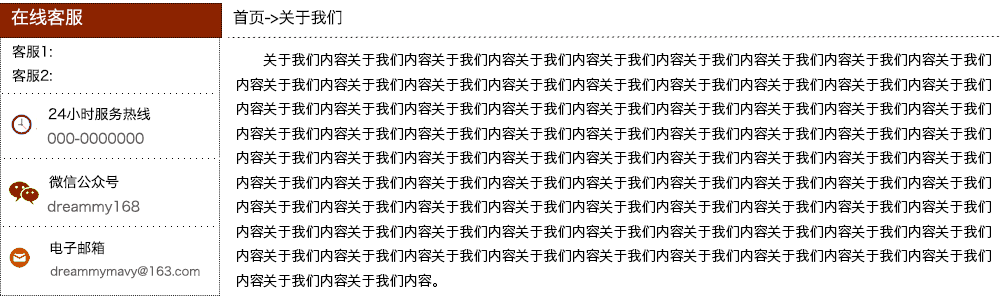
<style>
.page{position:relative;width:1000px;height:300px;background:#ffffff}
.page>*{position:absolute;margin:0}
.t1{font:18px "HiraginoSansGB-W3";color:#ffffff}
.t2{font:16px "HiraginoSansGB-W3";color:#000000}
.t3{font:14px "HiraginoSansGB-W3";color:#000000}
.t4{font:14px "HiraginoSansGB-W3";color:#615e5e}
.t5{font:12px "HiraginoSansGB-W3";color:#615e5e}
</style>
<div class="page">
<p class="t1" style="left:11px;top:8px;width:72px;height:18px">在线客服</p>
<p class="t2" style="left:233px;top:9px;width:109px;height:16px">首页-&gt;关于我们</p>
<p class="t3" style="left:12px;top:44px;width:40px;height:14px">客服1:</p>
<p class="t3" style="left:237px;top:52px;width:754px;height:236px">关于我们内容关于我们内容关于我们内容关于我们内容关于我们内容关于我们内容关于我们内容关于我们内容关于我们<br>内容关于我们内容关于我们内容关于我们内容关于我们内容关于我们内容关于我们内容关于我们内容关于我们内容关于我们<br>内容关于我们内容关于我们内容关于我们内容关于我们内容关于我们内容关于我们内容关于我们内容关于我们内容关于我们<br>内容关于我们内容关于我们内容关于我们内容关于我们内容关于我们内容关于我们内容关于我们内容关于我们内容关于我们<br>内容关于我们内容关于我们内容关于我们内容关于我们内容关于我们内容关于我们内容关于我们内容关于我们内容关于我们<br>内容关于我们内容关于我们内容关于我们内容关于我们内容关于我们内容关于我们内容关于我们内容关于我们内容关于我们<br>内容关于我们内容关于我们内容关于我们内容关于我们内容关于我们内容关于我们内容关于我们内容关于我们内容关于我们<br>内容关于我们内容关于我们内容关于我们内容关于我们内容关于我们内容关于我们内容关于我们内容关于我们内容关于我们<br>内容关于我们内容关于我们内容关于我们内容关于我们内容关于我们内容关于我们内容关于我们内容关于我们内容关于我们<br>内容关于我们内容关于我们内容。</p>
<p class="t3" style="left:12px;top:68px;width:40px;height:14px">客服2:</p>
<p class="t3" style="left:48px;top:107px;width:103px;height:14px">24小时服务热线</p>
<p class="t4" style="left:47px;top:132px;width:97px;height:12px">000-0000000</p>
<p class="t3" style="left:49px;top:175px;width:70px;height:14px">微信公众号</p>
<p class="t4" style="left:47px;top:200px;width:93px;height:15px">dreammy168</p>
<p class="t3" style="left:50px;top:241px;width:55px;height:14px">电子邮箱</p>
<p class="t5" style="left:50px;top:266px;width:150px;height:13px">dreammymavy@163.com</p>
</div>
